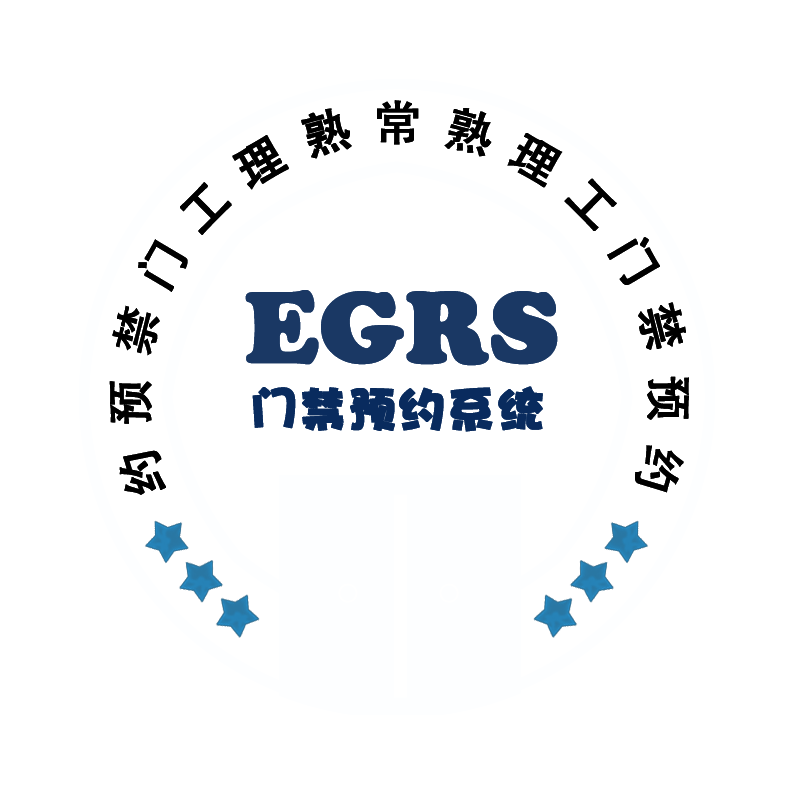
<style>
.page{position:relative;width:800px;height:800px;background:#ffffff}
.page>*{position:absolute;margin:0}
.t1{font:48px "AdobeHeitiStd-Regular";color:#000000;font-weight:bold}
.t2{font:48.2px "AdobeHeitiStd-Regular";color:#000000;font-weight:bold}
.t3{font:48.3px "AdobeHeitiStd-Regular";color:#000000;font-weight:bold}
.t4{font:100px "CooperBlackStd";color:#1a3864;font-weight:bold}
.t5{font:48.1px "AdobeHeitiStd-Regular";color:#000000;font-weight:bold}
.t6{font:47.8px "AdobeHeitiStd-Regular";color:#000000;font-weight:bold}
.t7{font:48px "DFPHaiBaoW12";color:#092b5e;font-weight:bold}
.t8{font:47.5px "AdobeHeitiStd-Regular";color:#000000;font-weight:bold}
</style>
<div class="page">
<p class="t1" style="left:377px;top:100px;width:42px;height:45px">常</p>
<p class="t2" style="left:301px;top:108px;width:51px;height:51px;rotate:-15deg">熟</p>
<p class="t2" style="left:444px;top:108px;width:48px;height:49px;rotate:15deg">熟</p>
<p class="t3" style="left:232px;top:135px;width:57px;height:55px;rotate:-30deg">理</p>
<p class="t3" style="left:507px;top:133px;width:56px;height:55px;rotate:30deg">理</p>
<p class="t3" style="left:180px;top:182px;width:52px;height:53px;rotate:-45deg">工</p>
<p class="t3" style="left:564px;top:178px;width:53px;height:53px;rotate:45deg">工</p>
<p class="t3" style="left:138px;top:239px;width:50px;height:53px;rotate:-61deg">门</p>
<p class="t3" style="left:607px;top:237px;width:53px;height:48px;rotate:61deg">门</p>
<p class="t4" style="left:245px;top:290px;width:313px;height:76px">EGRS</p>
<p class="t5" style="left:112px;top:305px;width:48px;height:51px;rotate:-76deg">禁</p>
<p class="t5" style="left:638px;top:302px;width:48px;height:48px;rotate:76deg">禁</p>
<p class="t6" style="left:647px;top:376px;width:42px;height:44px;rotate:91deg">预</p>
<p class="t6" style="left:109px;top:381px;width:43px;height:43px;rotate:-91deg">预</p>
<p class="t7" style="left:252px;top:386px;width:291px;height:46px">门禁预约系统</p>
<p class="t8" style="left:635px;top:445px;width:49px;height:48px;rotate:106deg">约</p>
<p class="t8" style="left:119px;top:450px;width:47px;height:45px;rotate:-106deg">约</p>
</div>
